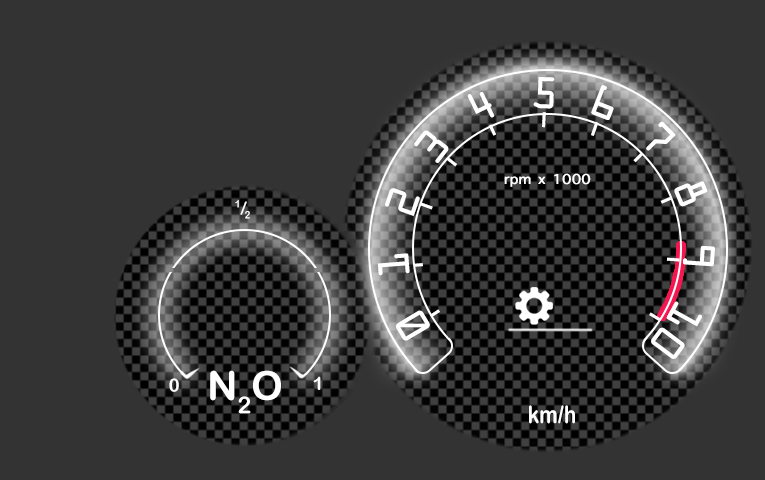
<style>
.page{position:relative;width:765px;height:480px;background:#333333}
.page>*{position:absolute;margin:0}
.t1{font:40px "OCRAStd";color:#ffffff}
.t2{font:18px "AppleSymbols";letter-spacing:-0.02em;color:#ffffff;font-weight:bold;scale:1.11 1}
.t3{font:18px "ArialRoundedMTBold";color:#ffffff;scale:0.88 1}
.t4{font:18px "ArialRoundedMTBold";color:#ffffff;font-style:italic;scale:0.88 1}
.t5{font:40px "ArialRoundedMTBold";color:#ffffff}
.t6{font:18px "ArialRoundedMTBold";color:#ffffff}
.t7{font:41px "ArialRoundedMTBold";color:#ffffff;scale:0.88 1}
</style>
<div class="page">
<p class="t1" style="left:377px;top:77px;width:338px;height:282px;rotate:4deg">0 1 2 3 4 5 6 7 8 9 10</p>
<p class="t2" style="left:504px;top:173px;width:87px;height:14px">rpm x 1000</p>
<p class="t3" style="left:235px;top:200px;width:15px;height:19px">1<span class="t4">/</span>2</p>
<p class="t5" style="left:210px;top:370px;width:71px;height:44px">N2O</p>
<p class="t6" style="left:313px;top:376px;width:8px;height:14px">1</p>
<p class="t6" style="left:169px;top:378px;width:10px;height:14px">0</p>
<p class="t7" style="left:529px;top:405px;width:46px;height:19px">km/h</p>
</div>
